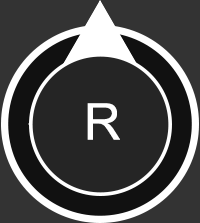
<style>
.page{position:relative;width:200px;height:223px;background:#252525}
.page>*{position:absolute;margin:0}
.t1{font:50.5px "ArialMT";color:#ffffff}
</style>
<div class="page">
<p class="t1" style="left:87px;top:103px;width:33px;height:37px">R</p>
</div>
